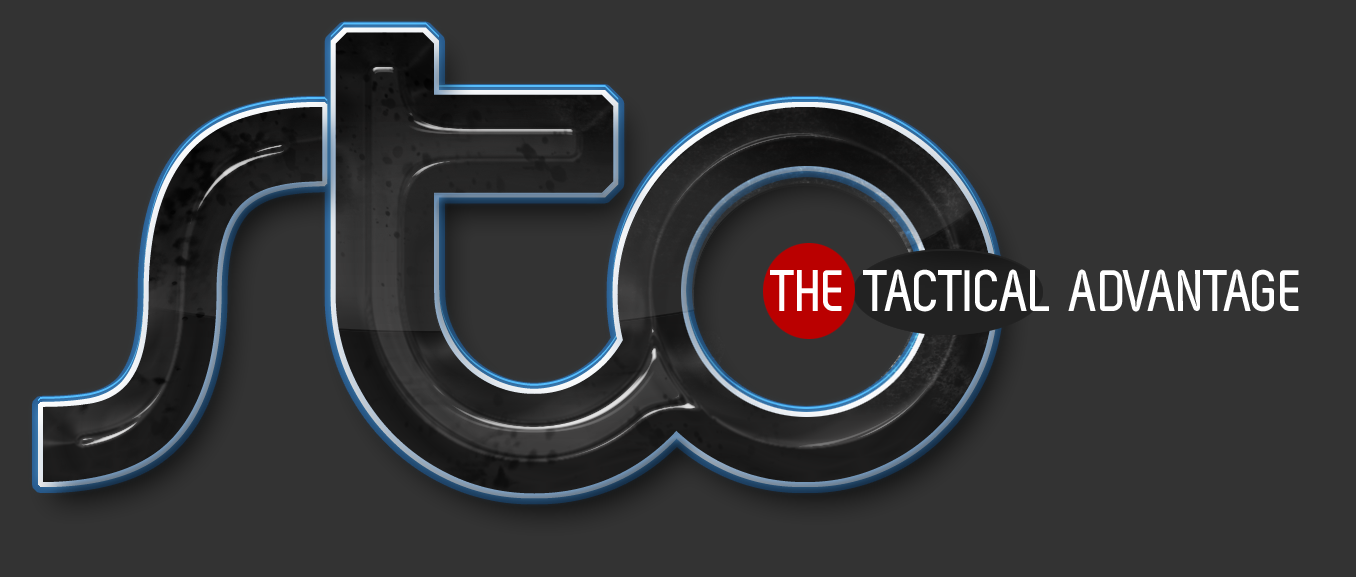
<style>
.page{position:relative;width:1356px;height:577px;background:#333333}
.page>*{position:absolute;margin:0}
.t1{font:58.3px "ZagBold";color:#ffffff;text-transform:uppercase}
</style>
<div class="page">
<p class="t1" style="left:770px;top:269px;width:529px;height:43px">The Tactical Advantage</p>
</div>
